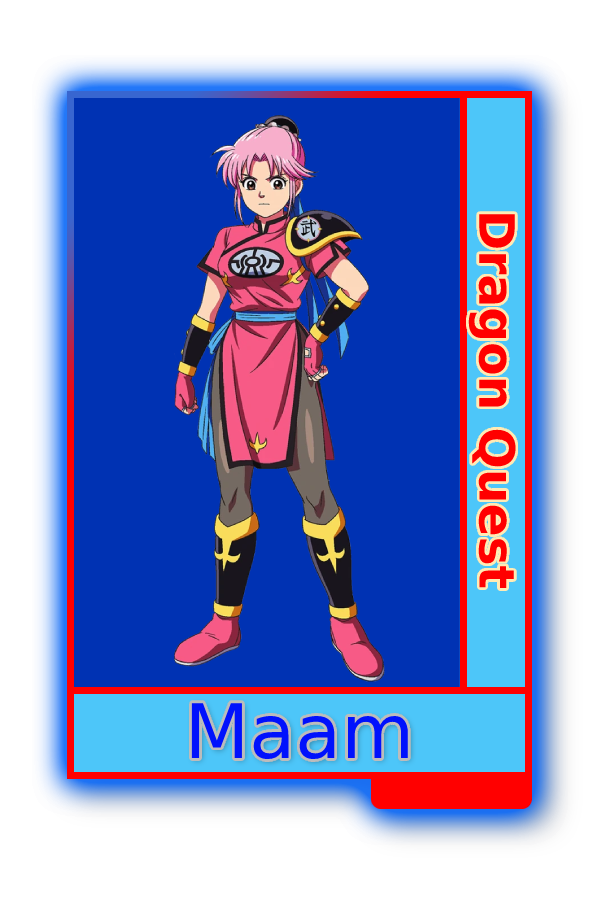
<style>
.page{position:relative;width:600px;height:900px;background:#0032b3}
.page>*{position:absolute;margin:0}
.t1{font:48.8px "MADETOMMY-Bold";color:#ff0000}
.t2{font:75px "CoolveticaRg-Regular";color:#0011fd}
</style>
<div class="page">
<p class="t1" style="left:468px;top:214px;width:48px;height:374px;rotate:90deg">Dragon Quest</p>
<p class="t2" style="left:191px;top:703px;width:217px;height:57px">Maam</p>
</div>
